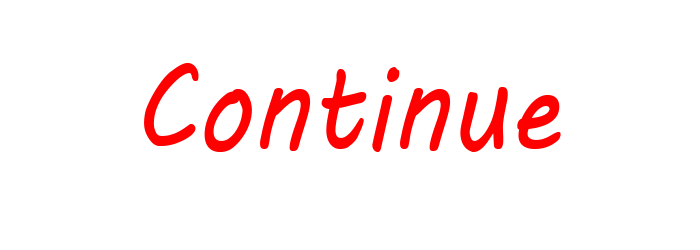
<style>
.page{position:relative;width:700px;height:250px;background:#ffffff}
.page>*{position:absolute;margin:0}
.t1{font:125px "MVBoli";color:#ff0000;scale:0.84 1}
</style>
<div class="page">
<p class="t1" style="left:144px;top:63px;width:417px;height:89px">Continue</p>
</div>
